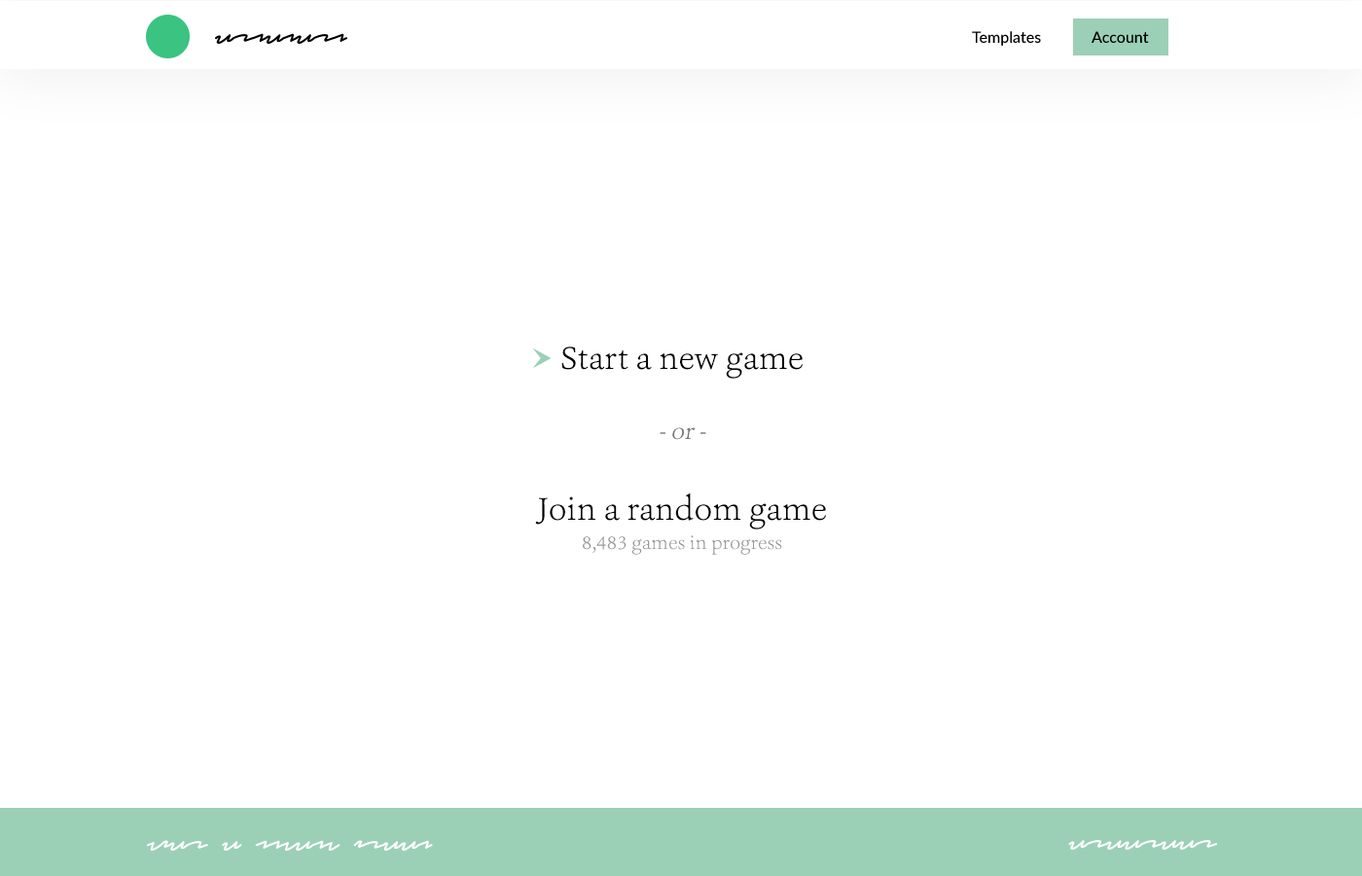
<style>
.page{position:relative;width:1362px;height:876px;background:#ffffff}
.page>*{position:absolute;margin:0}
.t1{font:33.1px "Ashbury-Light";color:#000000}
.t2{font:24.3px "Ashbury-Light";color:#777777;font-style:italic}
.t3{font:19.5px/29.2px "Ashbury-Light";color:#9d9595}
.t4{font:33.1px/29.2px "Ashbury-Light";color:#000000}
</style>
<div class="page">
<p class="t1" style="left:561px;top:346px;width:242px;height:32px">Start a new game</p>
<p class="t2" style="left:660px;top:427px;width:46px;height:13px">- or -</p>
<p class="t3" style="left:535px;top:492px;width:291px;height:63px;text-align:center"><span class="t4">Join a random game<br></span>8,483 games in progress</p>
</div>
